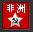
<style>
.page{position:relative;width:33px;height:32px;background:#c50000}
.page>*{position:absolute;margin:0}
.t1{font:10.4px "SimSun";color:#ffffff}
</style>
<div class="page">
<p class="t1" style="left:7px;top:4px;width:18px;height:9px">非洲</p>
</div>
